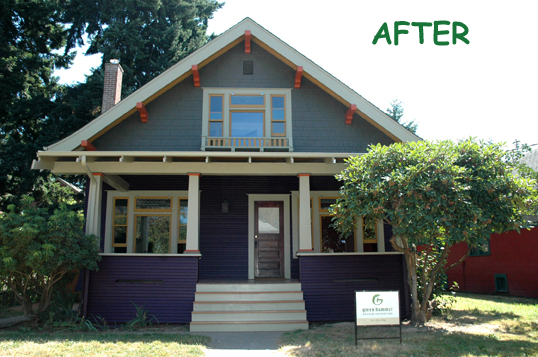
<style>
.page{position:relative;width:538px;height:357px}
.page>*{position:absolute;margin:0}
.t1{font:30px "ComicSansMS-Bold";color:#197339}
</style>
<div class="page">
<p class="t1" style="left:372px;top:20px;width:98px;height:26px">AFTER</p>
</div>
